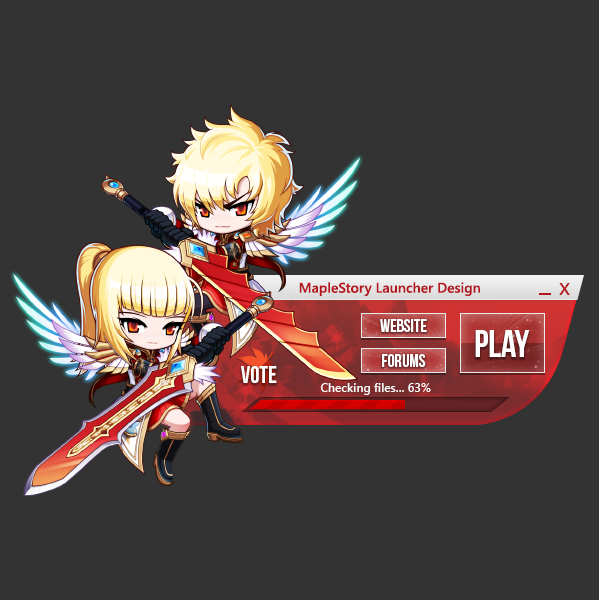
<style>
.page{position:relative;width:600px;height:600px;background:#333333}
.page>*{position:absolute;margin:0}
.t1{font:14px "SegoeUI-SemiBold";letter-spacing:-0.001em;color:#b5161d}
.t2{font:24px "MyriadPro-Regular";letter-spacing:-0.001em;color:#b5161d}
.t3{font:18px "BebasNeue";letter-spacing:-0.001em;color:#ffffff}
.t4{font:38px "BebasNeue";letter-spacing:-0.001em;color:#ffffff}
.t5{font:24px "BebasNeue";letter-spacing:-0.001em;color:#ffffff}
.t6{font:12px "SegoeUI-SemiBold";letter-spacing:-0.001em;color:#ffffff}
</style>
<div class="page">
<p class="t1" style="left:299px;top:282px;width:181px;height:14px">MapleStory Launcher Design</p>
<p class="t2" style="left:559px;top:283px;width:11px;height:12px">x</p>
<p class="t3" style="left:380px;top:319px;width:47px;height:13px">website</p>
<p class="t4" style="left:475px;top:330px;width:55px;height:27px">Play</p>
<p class="t5" style="left:241px;top:366px;width:36px;height:17px">VOTE</p>
<p class="t3" style="left:382px;top:354px;width:44px;height:13px">forums</p>
<p class="t6" style="left:320px;top:383px;width:111px;height:12px">Checking files... 63%</p>
</div>
